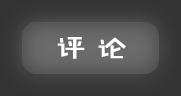
<style>
.page{position:relative;width:181px;height:96px}
.page>*{position:absolute;margin:0}
.t1{font:29.2px "FZJHJW--GB1-0";letter-spacing:0.38em;color:#ffffff;font-weight:bold}
</style>
<div class="page">
<p class="t1" style="left:57px;top:37px;width:69px;height:22px">评论</p>
</div>
